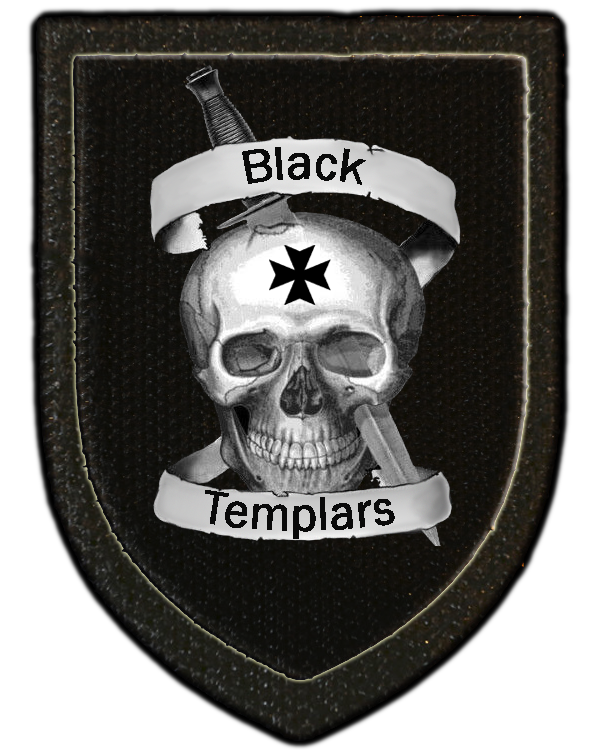
<style>
.page{position:relative;width:600px;height:750px;background:#ffffff}
.page>*{position:absolute;margin:0}
.t1{font:48px "FranklinGothic-Book";color:#0a0a0a}
</style>
<div class="page">
<p class="t1" style="left:242px;top:147px;width:124px;height:38px">Black</p>
<p class="t1" style="left:205px;top:490px;width:190px;height:49px">Templars</p>
</div>
